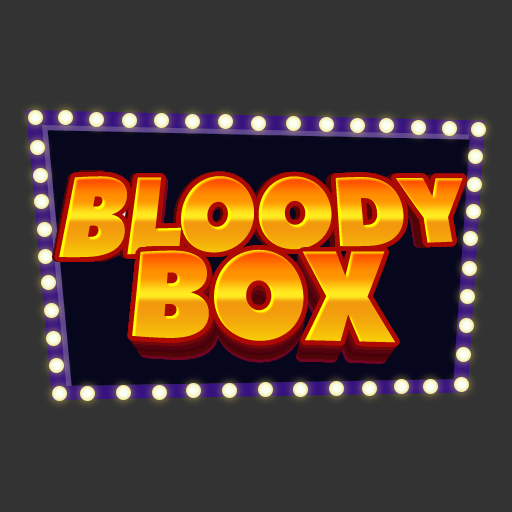
<style>
.page{position:relative;width:512px;height:512px;background:#333333}
.page>*{position:absolute;margin:0}
.t1{font:99.2px "PeaceSans";letter-spacing:-0.025em;scale:0.89 1}
.t2{font:101.3px "PeaceSans";letter-spacing:-0.025em;scale:0.89 1}
.t3{font:101.7px "PeaceSans";letter-spacing:-0.025em;scale:0.89 1}
.t4{font:97.3px "PeaceSans";letter-spacing:-0.025em;scale:0.89 1}
.t5{font:124.8px "PeaceSans";letter-spacing:-0.025em;scale:0.89 1}
.t6{font:122.3px "PeaceSans";letter-spacing:-0.025em;scale:0.89 1}
.t7{font:119.8px "PeaceSans";letter-spacing:-0.025em;scale:0.89 1}
.t8{font:117.4px "PeaceSans";letter-spacing:-0.025em;scale:0.89 1}
</style>
<div class="page">
<p class="t1" style="left:65px;top:174px;width:390px;height:84px">bLOODY</p>
<p class="t2" style="left:56px;top:176px;width:403px;height:82px">BLOODY</p>
<p class="t3" style="left:59px;top:176px;width:404px;height:82px">BLOODY</p>
<p class="t4" style="left:66px;top:179px;width:386px;height:78px">BLOODY</p>
<p class="t5" style="left:132px;top:249px;width:264px;height:94px">BOX</p>
<p class="t6" style="left:134px;top:254px;width:259px;height:92px">BOX</p>
<p class="t7" style="left:137px;top:260px;width:253px;height:90px">BOX</p>
<p class="t8" style="left:139px;top:265px;width:249px;height:88px">BOX</p>
</div>
